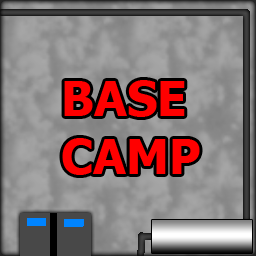
<style>
.page{position:relative;width:256px;height:256px}
.page>*{position:absolute;margin:0}
.t1{font:48px "Tahoma-Bold";color:#ff0000}
</style>
<div class="page">
<p class="t1" style="left:62px;top:80px;width:138px;height:95px">BASE<br>CAMP</p>
</div>
